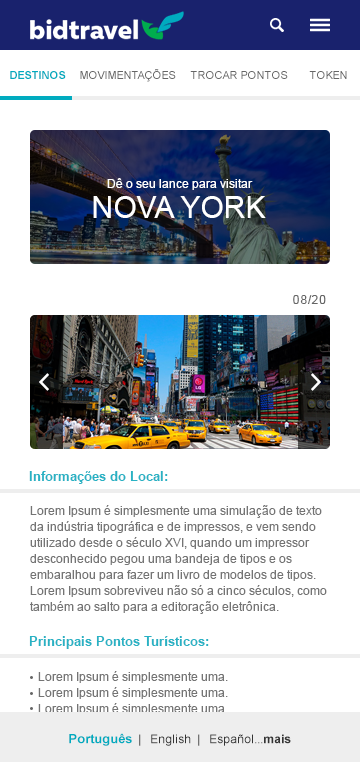
<style>
.page{position:relative;width:360px;height:762px;background:#ffffff}
.page>*{position:absolute;margin:0}
.t1{font:11px "Arial-BoldMT";color:#00abbf;text-transform:uppercase}
.t2{font:11px "ArialMT";color:#666666;text-transform:uppercase}
.t3{font:12px "ArialMT";color:#ffffff}
.t4{font:30px "ArialMT";color:#ffffff;text-transform:uppercase}
.t5{font:12px "ArialMT";letter-spacing:0.05em;color:#666666}
.t6{font:13px "Arial-BoldMT";color:#28b2c4}
.t7{font:12px/16px "ArialMT";color:#666666}
.t8{font:12px/16px "ArialMT"}
.t9{font:12px "ArialMT";color:#333333}
.t10{font:13px "Arial-BoldMT";color:#00abbf}
.t11{font:12px "Arial-BoldMT";color:#333333}
</style>
<div class="page">
<p class="t1" style="left:10px;top:71px;width:56px;height:8px">Destinos</p>
<p class="t2" style="left:80px;top:69px;width:96px;height:13px">Movimentações</p>
<p class="t2" style="left:190px;top:71px;width:98px;height:8px">Trocar Pontos</p>
<p class="t2" style="left:309px;top:71px;width:38px;height:8px">Token</p>
<p class="t3" style="left:107px;top:178px;width:146px;height:12px">Dê o seu lance para visitar</p>
<p class="t4" style="left:93px;top:196px;width:173px;height:22px">Nova York</p>
<p class="t5" style="left:293px;top:295px;width:33px;height:9px">08/20</p>
<p class="t6" style="left:29px;top:471px;width:139px;height:13px">Informações do Local:</p>
<p class="t7" style="left:30px;top:505px;width:297px;height:109px;opacity:0.93">Lorem Ipsum é simplesmente uma simulação de texto da indústria tipográfica e de impressos, e vem sendo utilizado desde o século XVI, quando um impressor desconhecido pegou uma bandeja de tipos e os embaralhou para fazer um livro de modelos de tipos. Lorem Ipsum sobreviveu não só a cinco séculos, como também ao salto para a editoração eletrônica.</p>
<p class="t6" style="left:29px;top:636px;width:180px;height:13px">Principais Pontos Turísticos:</p>
<p class="t8" style="left:38px;top:671px;width:190px;height:76px">Lorem Ipsum é simplesmente uma.<br>     Lorem Ipsum é simplesmente uma. <br>     Lorem Ipsum é simplesmente uma. <br>     Lorem Ipsum é simplesmente uma. <br>     Lorem Ipsum é simplesmente uma.</p>
<p class="t9" style="left:69px;top:733px;width:222px;height:13px"><span class="t10">Português</span>  |   English  |   Español...<span class="t11">mais</span></p>
</div>
